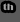
<style>
.page{position:relative;width:20px;height:22px;background:#5a5a5a}
.page>*{position:absolute;margin:0}
.t1{font:9.2px "Broadway";letter-spacing:0.05em;color:#a3a3a3;scale:0.93 1}
</style>
<div class="page">
<p class="t1" style="left:3px;top:3px;width:11px;height:8px">th</p>
</div>
